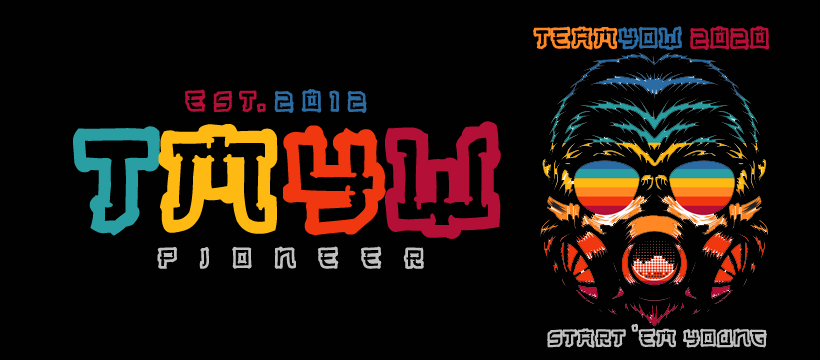
<style>
.page{position:relative;width:820px;height:360px;background:#010101}
.page>*{position:absolute;margin:0}
.t1{font:30px "OldJapanese";color:#ff8824}
.t2{font:30px "OldJapanese";color:#2b6ca4}
.t3{font:30px "OldJapanese";color:#b40f37}
.t4{font:150px "OldJapanese";color:#299fa3}
.t5{font:150px "OldJapanese";color:#feb913}
.t6{font:150px "OldJapanese";color:#f13710}
.t7{font:150px "OldJapanese";color:#b40f37}
.t8{font:30px "OldJapanese";color:#c0c0c0}
.t9{font:25px "OldJapanese";color:#c0c0c0}
</style>
<div class="page">
<p class="t1" style="left:533px;top:25px;width:237px;height:25px">TEAM<span class="t2">YOW </span><span class="t3">2020</span></p>
<p class="t2" style="left:185px;top:88px;width:182px;height:25px"><span class="t3">e s t. </span>2 0 1 2</p>
<p class="t4" style="left:73px;top:121px;width:428px;height:118px">T<span class="t5">M</span><span class="t6">Y</span><span class="t7">W</span></p>
<p class="t8" style="left:157px;top:246px;width:267px;height:23px">p   i   o   n   e   e   r</p>
<p class="t9" style="left:547px;top:323px;width:220px;height:25px">start ‘em young</p>
</div>
